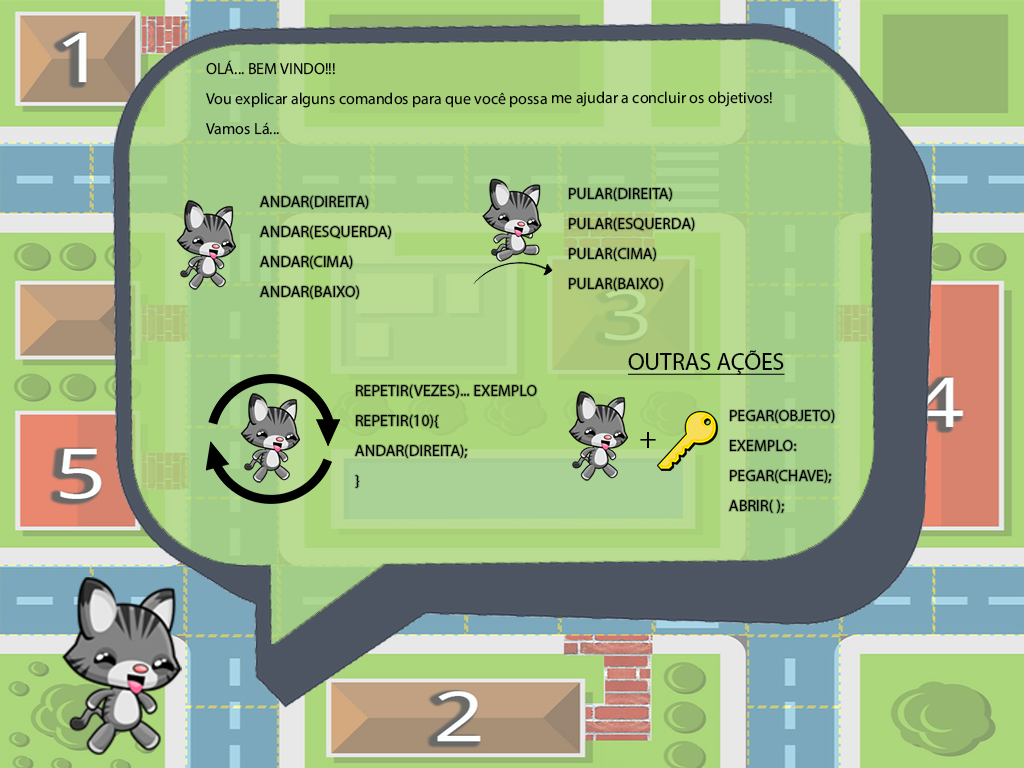
<style>
.page{position:relative;width:1024px;height:768px}
.page>*{position:absolute;margin:0}
.t1{font:16px/30px "MyriadPro-Regular";color:#010000}
.t2{font:16px/30px "MyriadPro-Regular";color:#000000}
.t3{font:24px "MyriadPro-Regular";color:#000000;text-decoration:underline}
.t4{font:30px "MyriadPro-Regular";color:#000000}
</style>
<div class="page">
<p class="t1" style="left:206px;top:60px;width:566px;height:75px">OLÁ... BEM VINDO!!!<br>Vou explicar alguns comandos para que você possa me ajudar a concluir os objetivos!<br>Vamos Lá...</p>
<p class="t2" style="left:260px;top:195px;width:131px;height:104px">ANDAR(DIREITA)<br>ANDAR(ESQUERDA)<br>ANDAR(CIMA)<br>ANDAR(BAIXO)</p>
<p class="t2" style="left:569px;top:187px;width:126px;height:104px">PULAR(DIREITA)<br>PULAR(ESQUERDA)<br>PULAR(CIMA)<br>PULAR(BAIXO)</p>
<p class="t3" style="left:628px;top:350px;width:157px;height:25px">OUTRAS AÇÕES</p>
<p class="t2" style="left:355px;top:384px;width:182px;height:104px">REPETIR(VEZES)... EXEMPLO<br>REPETIR(10){<br>ANDAR(DIREITA);<br>}</p>
<p class="t2" style="left:729px;top:409px;width:106px;height:104px">PEGAR(OBJETO)<br>EXEMPLO:<br>PEGAR(CHAVE);<br>ABRIR( );</p>
<p class="t4" style="left:640px;top:432px;width:16px;height:16px">+</p>
</div>
